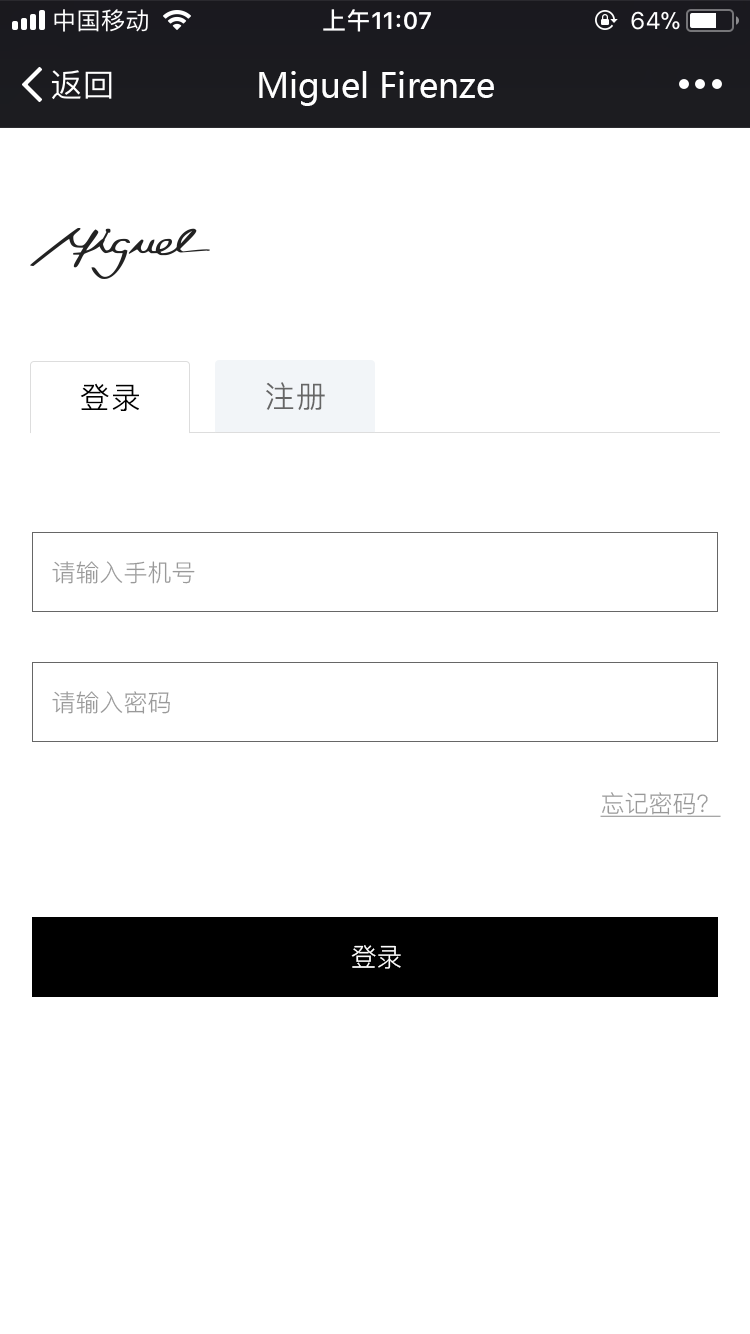
<style>
.page{position:relative;width:750px;height:1334px;background:#ffffff}
.page>*{position:absolute;margin:0}
.t1{font:34px "MicrosoftYaHei";color:#ffffff}
.t2{font:30px "PingFang-SC-Regular";letter-spacing:0.05em;color:#000000;text-transform:uppercase}
.t3{font:30px "PingFang-SC-Regular";letter-spacing:0.05em;color:#666666;text-transform:uppercase}
.t4{font:24px "PingFang-SC-Regular";color:#999999}
.t5{font:24px "PingFang-SC-Regular";color:#999999;text-decoration:underline}
.t6{font:26px "PingFang-SC-Regular";color:#ffffff}
</style>
<div class="page">
<p class="t1" style="left:259px;top:71px;width:235px;height:35px">Miguel Firenze</p>
<p class="t2" style="left:80px;top:383px;width:59px;height:28px">登录</p>
<p class="t3" style="left:266px;top:382px;width:59px;height:28px">注册</p>
<p class="t4" style="left:52px;top:561px;width:143px;height:23px">请输入手机号</p>
<p class="t4" style="left:52px;top:691px;width:118px;height:23px">请输入密码</p>
<p class="t5" style="left:600px;top:792px;width:121px;height:25px">忘记密码？</p>
<p class="t6" style="left:351px;top:945px;width:50px;height:24px">登录</p>
</div>
